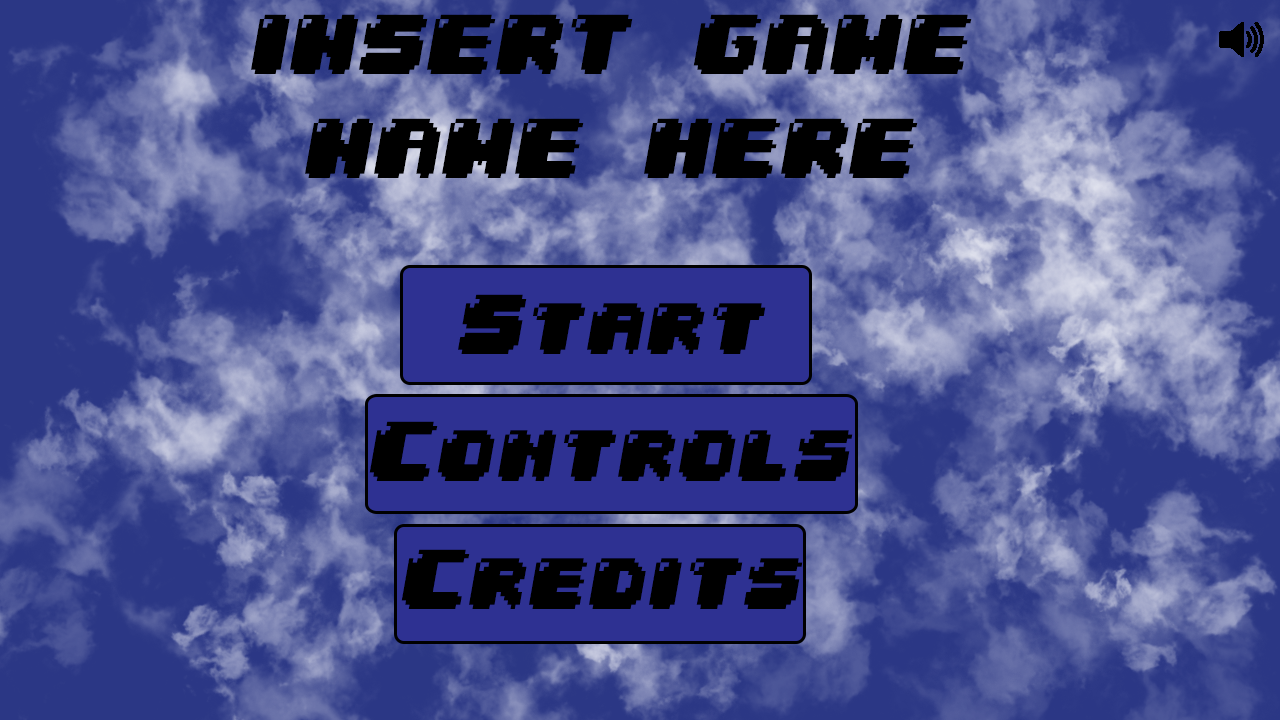
<style>
.page{position:relative;width:1280px;height:720px}
.page>*{position:absolute;margin:0}
.t1{font:72px/20px "04b30";letter-spacing:0.011em;color:#000000;font-style:italic}
.t2{font:72px "04b30";letter-spacing:0.011em;color:#000000;font-style:italic}
</style>
<div class="page">
<p class="t1" style="left:251px;top:14px;width:721px;height:164px;text-align:center">INSERT GAME <br><br><br><br><br>NAME HERE</p>
<p class="t2" style="left:458px;top:294px;width:308px;height:60px">Start</p>
<p class="t2" style="left:369px;top:421px;width:484px;height:60px">Controls</p>
<p class="t2" style="left:401px;top:549px;width:402px;height:60px">Credits</p>
</div>
